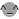
<style>
.page{position:relative;width:19px;height:19px;background:#ffffff}
.page>*{position:absolute;margin:0}
.t1{font:10.1px "MyriadPro-Regular";scale:1.11 1}
</style>
<div class="page">
<p class="t1" style="left:0px;top:5px;width:19px;height:9px">^_^</p>
</div>
